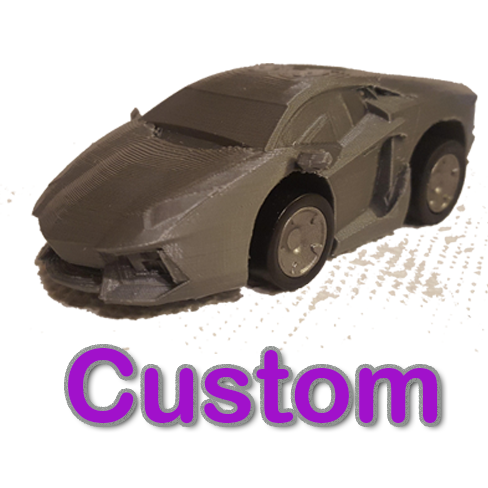
<style>
.page{position:relative;width:488px;height:488px;background:#ffffff}
.page>*{position:absolute;margin:0}
.t1{font:102px "ArialRoundedMTBold";color:#a111cb}
</style>
<div class="page">
<p class="t1" style="left:68px;top:348px;width:370px;height:76px">Custom</p>
</div>
